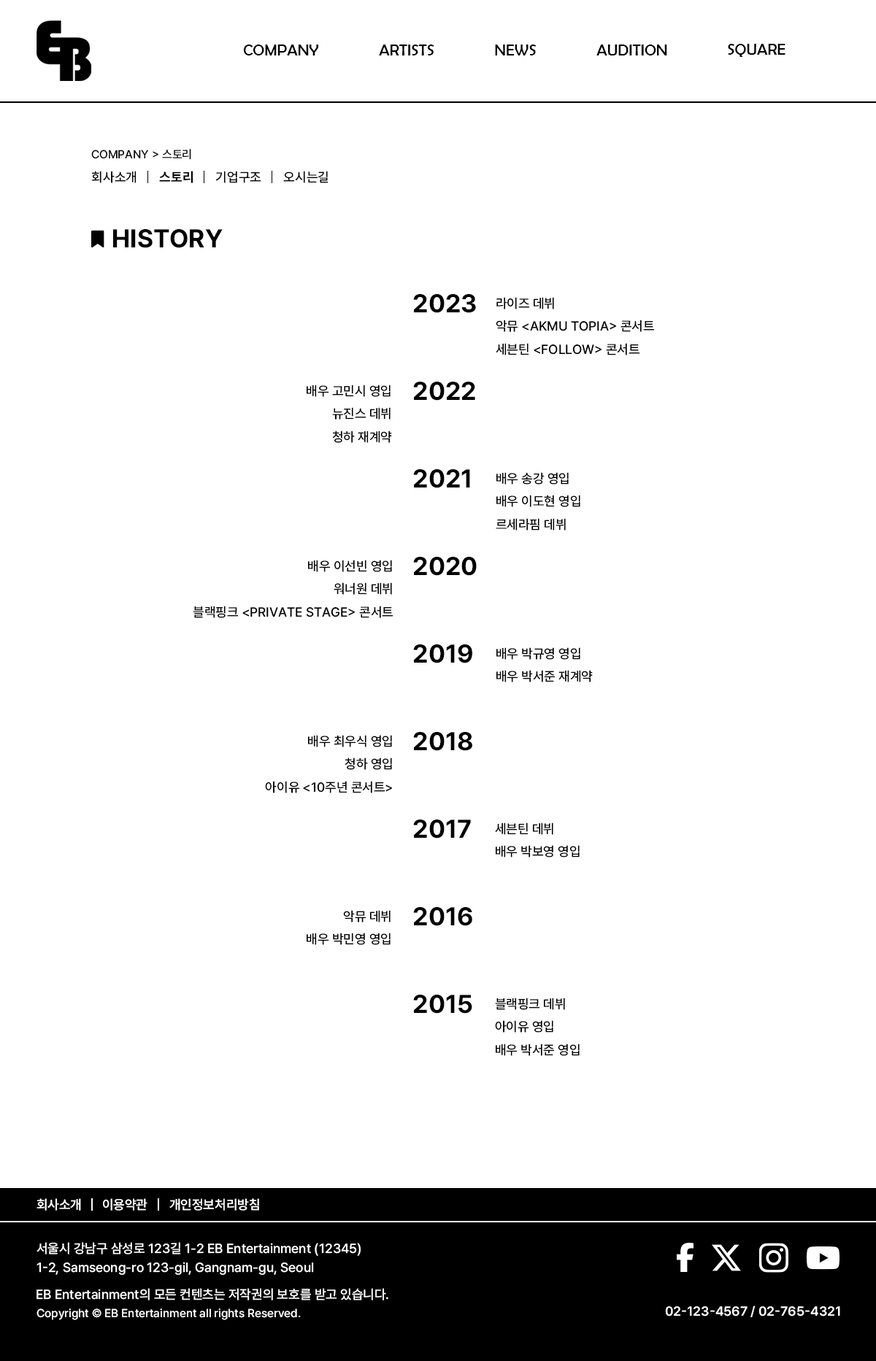
<style>
.page{position:relative;width:876px;height:1361px;background:#ffffff}
.page>*{position:absolute;margin:0}
.t1{font:16.1px "BerlinSansFB-Reg";color:#000000}
.t2{font:11.7px "Pretendard-Medium";color:#000000}
.t3{font:13.1px "Pretendard-Medium";color:#000000}
.t4{font:13.1px "Pretendard-Bold";color:#000000}
.t5{font:25.5px "Pretendard-Bold";color:#000000}
.t6{font:13.1px "Pretendard-SemiBold";color:#ffffff}
.t7{font:13.1px/19px "Pretendard-Medium";color:#ffffff}
.t8{font:13.1px "Pretendard-Medium";color:#ffffff}
.t9{font:11.7px "Pretendard-Medium";color:#ffffff}
</style>
<div class="page">
<p class="t1" style="left:243px;top:45px;width:75px;height:10px">COMPANY</p>
<p class="t1" style="left:379px;top:45px;width:55px;height:10px">ARTISTS</p>
<p class="t1" style="left:495px;top:45px;width:42px;height:10px">NEWS</p>
<p class="t1" style="left:596px;top:45px;width:71px;height:10px">AUDITION</p>
<p class="t1" style="left:728px;top:44px;width:57px;height:13px">SQUARE</p>
<p class="t2" style="left:91px;top:149px;width:100px;height:11px">COMPANY &gt; 스토리</p>
<p class="t3" style="left:91px;top:171px;width:45px;height:12px">회사소개</p>
<p class="t4" style="left:159px;top:171px;width:34px;height:12px">스토리</p>
<p class="t3" style="left:215px;top:171px;width:46px;height:12px">기업구조</p>
<p class="t3" style="left:283px;top:171px;width:45px;height:12px">오시는길</p>
<p class="t5" style="left:113px;top:229px;width:110px;height:19px">HISTORY</p>
<p class="t5" style="left:413px;top:294px;width:63px;height:19px">2023</p>
<p class="t3" style="left:496px;top:297px;width:159px;height:58px">라이즈 데뷔<br>악뮤 &lt;AKMU TOPIA&gt; 콘서트<br>세븐틴 &lt;FOLLOW&gt; 콘서트</p>
<p class="t3" style="left:307px;top:385px;width:85px;height:58px;text-align:right">배우 고민시 영입<br>뉴진스 데뷔<br>청하 재계약</p>
<p class="t5" style="left:413px;top:382px;width:62px;height:19px">2022</p>
<p class="t5" style="left:413px;top:469px;width:57px;height:19px">2021</p>
<p class="t3" style="left:496px;top:472px;width:84px;height:59px">배우 송강 영입<br>배우 이도현 영입<br>르세라핌 데뷔</p>
<p class="t5" style="left:413px;top:557px;width:64px;height:19px">2020</p>
<p class="t3" style="left:193px;top:560px;width:200px;height:58px;text-align:right">배우 이선빈 영입<br>워너원 데뷔<br>블랙핑크 &lt;PRIVATE STAGE&gt; 콘서트</p>
<p class="t5" style="left:413px;top:645px;width:59px;height:19px">2019</p>
<p class="t3" style="left:496px;top:647px;width:97px;height:35px">배우 박규영 영입<br>배우 박서준 재계약</p>
<p class="t3" style="left:265px;top:735px;width:127px;height:58px;text-align:right">배우 최우식 영입<br>청하 영입<br>아이유 &lt;10주년 콘서트&gt;</p>
<p class="t5" style="left:413px;top:732px;width:59px;height:19px">2018</p>
<p class="t5" style="left:413px;top:820px;width:58px;height:19px">2017</p>
<p class="t3" style="left:495px;top:823px;width:85px;height:35px">세븐틴 데뷔<br>배우 박보영 영입</p>
<p class="t3" style="left:307px;top:910px;width:84px;height:35px;text-align:right">악뮤 데뷔<br>배우 박민영 영입</p>
<p class="t5" style="left:413px;top:907px;width:59px;height:19px">2016</p>
<p class="t5" style="left:413px;top:995px;width:59px;height:19px">2015</p>
<p class="t3" style="left:495px;top:998px;width:85px;height:58px">블랙핑크 데뷔<br>아이유 영입<br>배우 박서준 영입</p>
<p class="t6" style="left:36px;top:1199px;width:45px;height:12px">회사소개</p>
<p class="t6" style="left:103px;top:1199px;width:44px;height:12px">이용약관</p>
<p class="t6" style="left:169px;top:1199px;width:90px;height:12px">개인정보처리방침</p>
<p class="t7" style="left:36px;top:1242px;width:325px;height:33px">서울시 강남구 삼성로 123길 1-2 EB Entertainment (12345)<br>1-2, Samseong-ro 123-gil, Gangnam-gu, Seoul</p>
<p class="t8" style="left:36px;top:1288px;width:352px;height:13px">EB Entertainment의 모든 컨텐츠는 저작권의 보호를 받고 있습니다.</p>
<p class="t9" style="left:36px;top:1309px;width:265px;height:11px">Copyright © EB Entertainment all rights Reserved.</p>
<p class="t6" style="left:665px;top:1306px;width:175px;height:12px">02-123-4567 / 02-765-4321</p>
</div>
